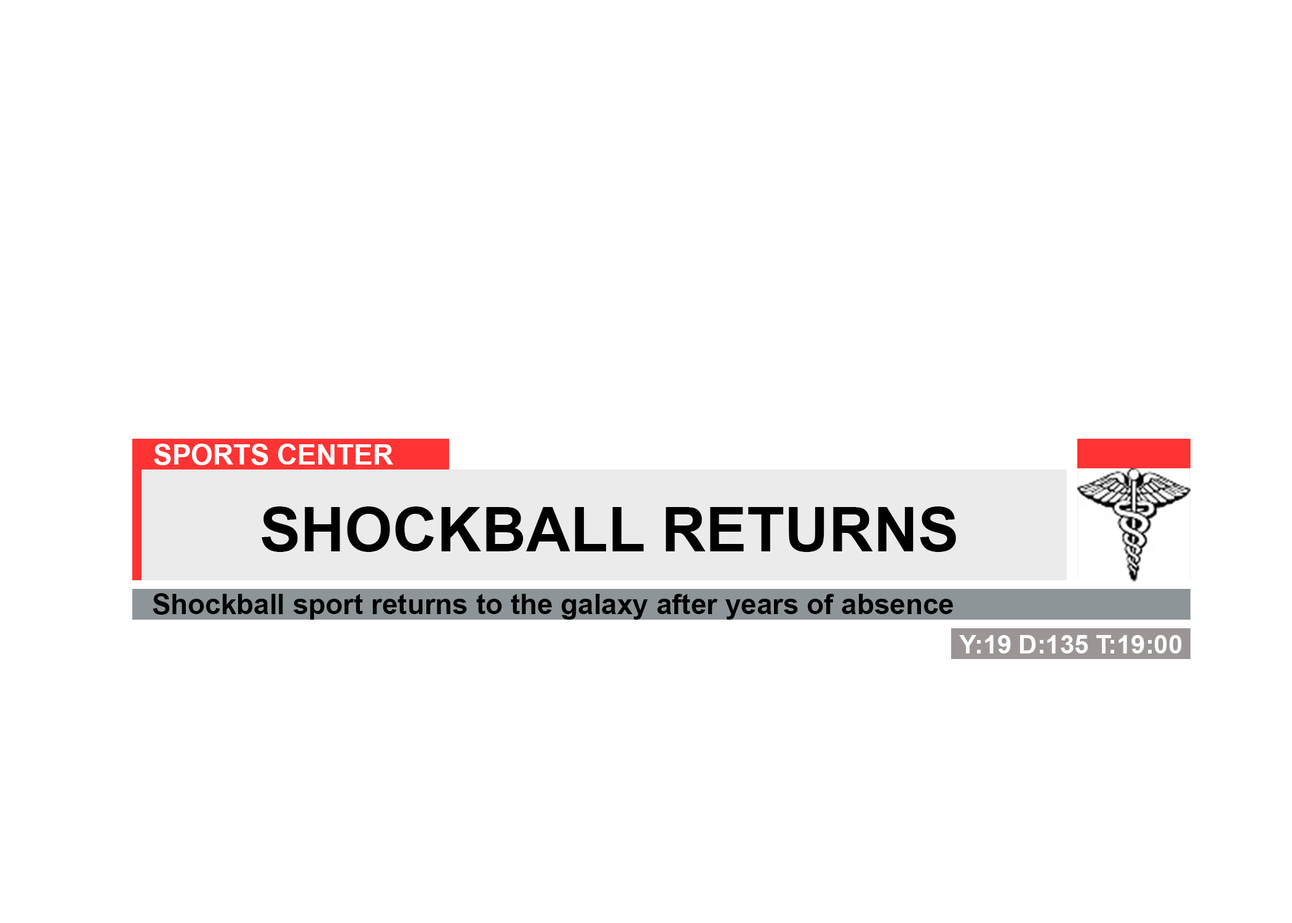
<style>
.page{position:relative;width:1292px;height:923px;background:#ffffff}
.page>*{position:absolute;margin:0}
.t1{font:28.2px "Arial-BoldMT";color:#ffffff}
.t2{font:61.5px "Arial-BoldMT";color:#000000}
.t3{font:28.2px "Arial-BoldMT";color:#000000}
.t4{font:25.6px "Arial-BoldMT";color:#ffffff}
</style>
<div class="page">
<p class="t1" style="left:154px;top:444px;width:239px;height:21px">SPORTS CENTER</p>
<p class="t2" style="left:261px;top:506px;width:695px;height:46px">SHOCKBALL RETURNS</p>
<p class="t3" style="left:153px;top:593px;width:800px;height:27px">Shockball sport returns to the galaxy after years of absence</p>
<p class="t4" style="left:959px;top:635px;width:223px;height:18px">Y:19 D:135 T:19:00</p>
</div>
